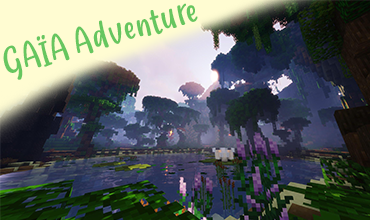
<style>
.page{position:relative;width:370px;height:220px}
.page>*{position:absolute;margin:0}
.t1{font:37.5px "LadyNature";letter-spacing:0.04em;color:#66c65f}
</style>
<div class="page">
<p class="t1" style="left:3px;top:3px;width:195px;height:77px;rotate:-16deg">GAÏA Adventure</p>
</div>
